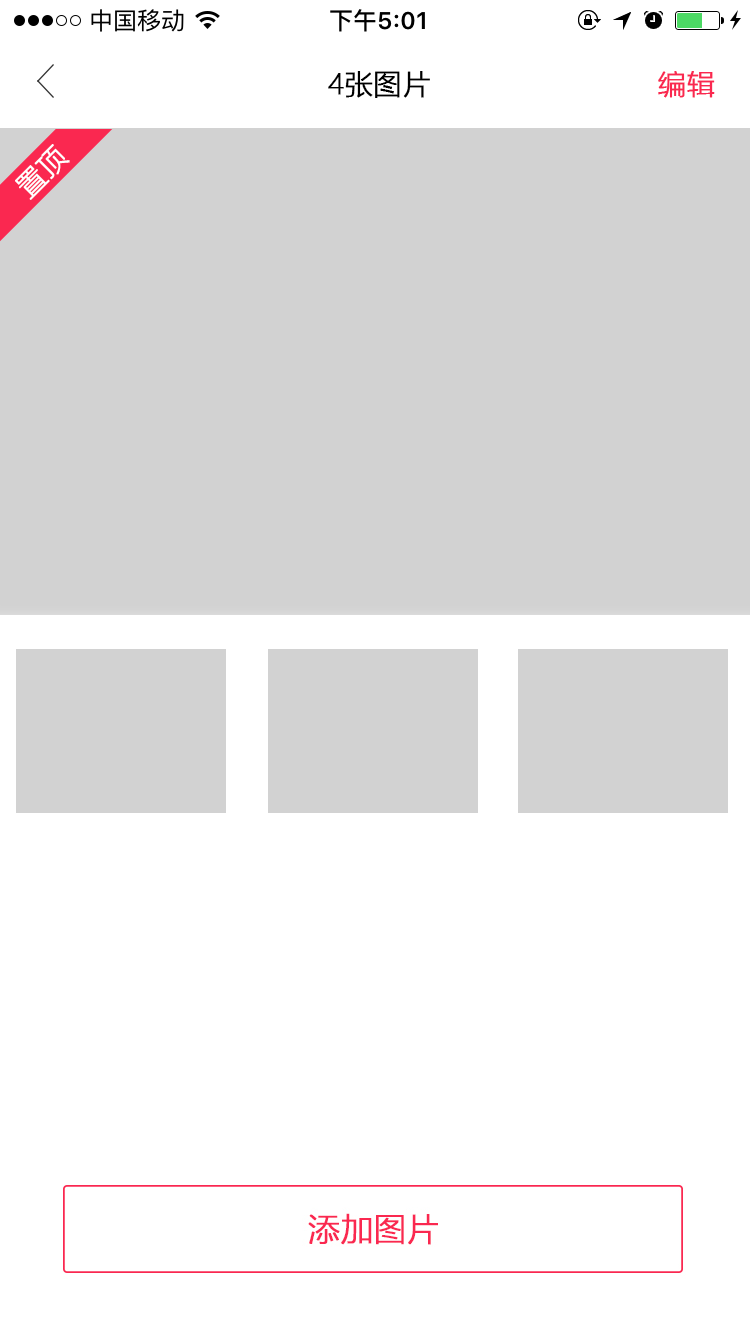
<style>
.page{position:relative;width:750px;height:1334px;background:#ffffff}
.page>*{position:absolute;margin:0}
.t1{font:28px "MicrosoftYaHeiLight";color:#000000;font-weight:bold}
.t2{font:28px "MicrosoftYaHeiLight";color:#fa2850;font-weight:bold}
.t3{font:28px "MicrosoftYaHeiLight";color:#ffffff;font-weight:bold}
</style>
<div class="page">
<p class="t1" style="left:328px;top:71px;width:102px;height:27px">4张图片</p>
<p class="t2" style="left:658px;top:71px;width:57px;height:27px">编辑</p>
<p class="t3" style="left:15px;top:144px;width:55px;height:56px;rotate:-45deg">置顶</p>
</div>
